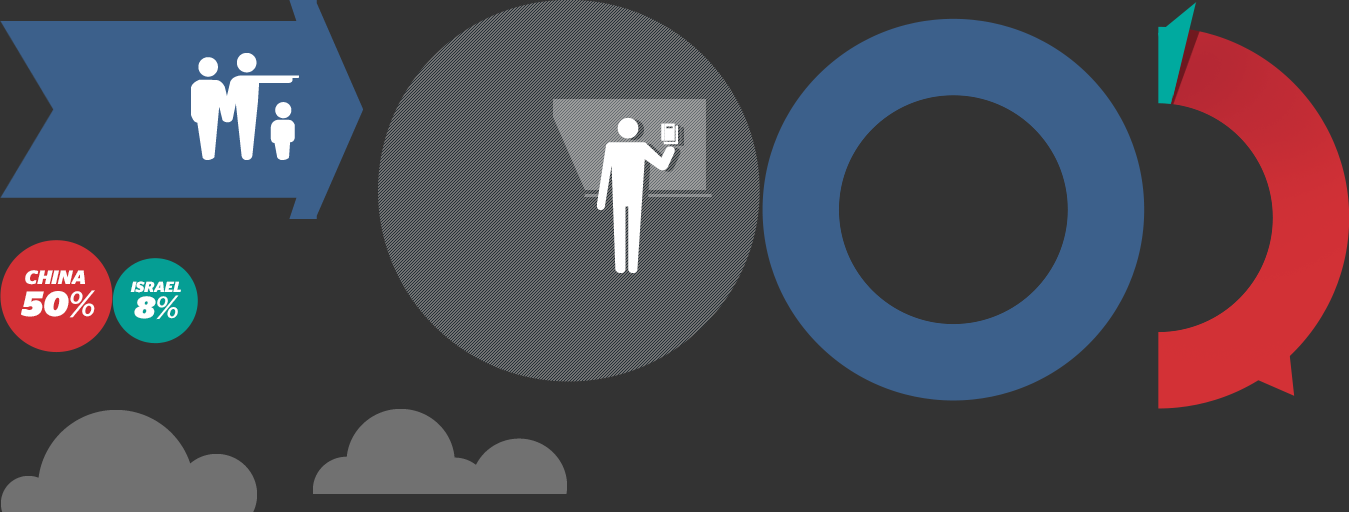
<style>
.page{position:relative;width:1349px;height:512px;background:#333333}
.page>*{position:absolute;margin:0}
.t1{font:19.4px "StagSans-BoldItalic";letter-spacing:-0.005em;color:#ffffff;text-transform:uppercase}
.t2{font:14.7px "StagSans-BoldItalic";letter-spacing:-0.005em;color:#ffffff;text-transform:uppercase}
.t3{font:35.2px "StagSans-BlackItalic";letter-spacing:-0.005em;color:#ffffff;text-transform:uppercase}
.t4{font:35.2px "StagSans-BookItalic";letter-spacing:-0.005em;color:#ffffff;text-transform:uppercase}
.t5{font:30.7px "StagSans-BlackItalic";letter-spacing:-0.005em;color:#ffffff;text-transform:uppercase}
.t6{font:30.7px "StagSans-BookItalic";letter-spacing:-0.005em;color:#ffffff;text-transform:uppercase}
</style>
<div class="page">
<p class="t1" style="left:25px;top:270px;width:60px;height:15px">China</p>
<p class="t2" style="left:130px;top:281px;width:51px;height:12px">Israel</p>
<p class="t3" style="left:21px;top:290px;width:74px;height:28px">50<span class="t4">%</span></p>
<p class="t5" style="left:134px;top:295px;width:45px;height:25px">8<span class="t6">%</span></p>
</div>
